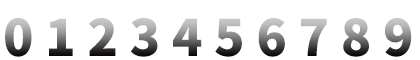
<style>
.page{position:relative;width:420px;height:60px;background:#ffffff}
.page>*{position:absolute;margin:0}
.t1{font:49.9px "SourceHanSansJP-Heavy";letter-spacing:0.24em}
</style>
<div class="page">
<p class="t1" style="left:5px;top:18px;width:407px;height:39px">0123456789</p>
</div>
